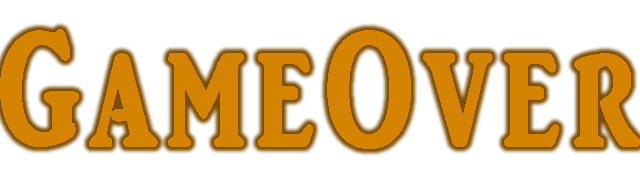
<style>
.page{position:relative;width:640px;height:180px;background:#ffffff}
.page>*{position:absolute;margin:0}
.t1{font:168.2px "ARJULIAN";letter-spacing:0.075em;color:#d48303;font-weight:bold;scale:0.73 1}
</style>
<div class="page">
<p class="t1" style="left:0px;top:29px;width:641px;height:120px">GameOver</p>
</div>
